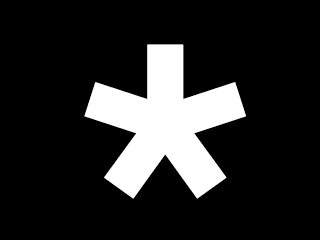
<style>
.page{position:relative;width:320px;height:240px;background:#000000}
.page>*{position:absolute;margin:0}
.t1{font:427.1px "HelveticaNeue-CondensedBold";letter-spacing:0.035em;color:#ffffff;font-weight:bold}
</style>
<div class="page">
<p class="t1" style="left:84px;top:44px;width:162px;height:155px">*</p>
</div>
